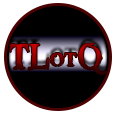
<style>
.page{position:relative;width:114px;height:114px;background:#000000}
.page>*{position:absolute;margin:0}
.t1{font:37.5px "PiecesofEight"}
</style>
<div class="page">
<p class="t1" style="left:9px;top:43px;width:98px;height:31px">TLotQ</p>
</div>
